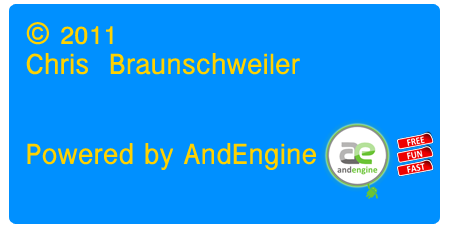
<style>
.page{position:relative;width:450px;height:229px;background:#0090ff}
.page>*{position:absolute;margin:0}
.t1{font:30px/30px "InaiMathi";color:#ffd200;font-weight:bold}
</style>
<div class="page">
<p class="t1" style="left:26px;top:22px;width:290px;height:148px">© 2011 <br>Chris  Braunschweiler<br><br><br>Powered by AndEngine</p>
</div>
